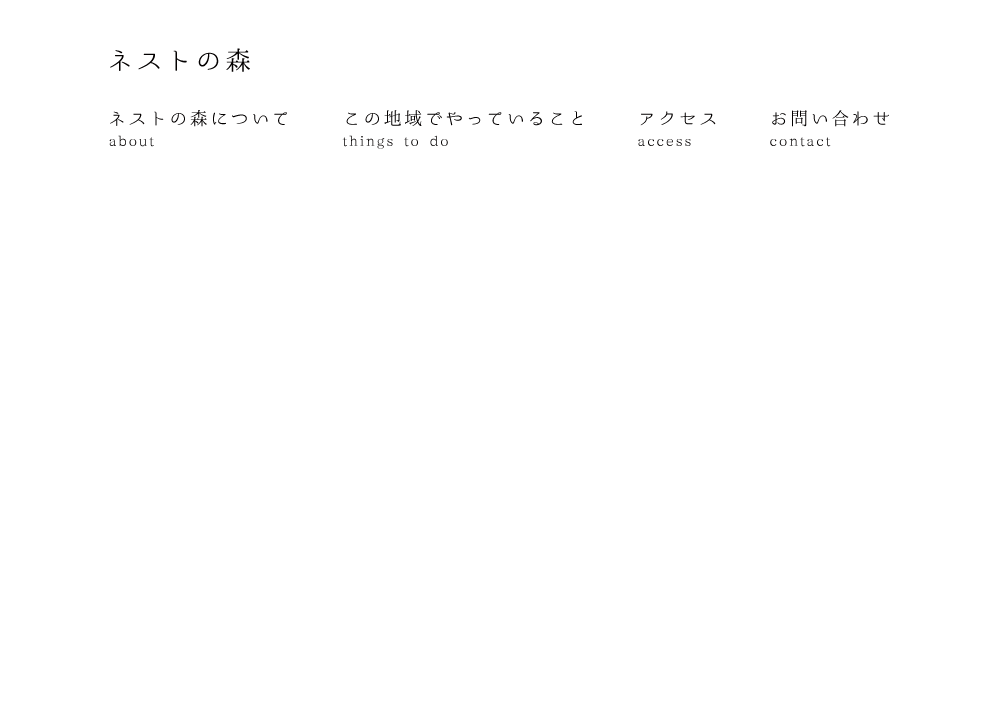
<style>
.page{position:relative;width:1000px;height:717px;background:#ffffff}
.page>*{position:absolute;margin:0}
.t1{font:26px "02UtsukushiMincho";letter-spacing:0.14em;color:#000000}
.t2{font:18px/21px "02UtsukushiMincho";letter-spacing:0.14em;color:#000000}
.t3{font:14px/21px "02UtsukushiMincho";letter-spacing:0.14em;color:#000000}
</style>
<div class="page">
<p class="t1" style="left:110px;top:48px;width:140px;height:24px">ネストの森</p>
<p class="t2" style="left:109px;top:110px;width:178px;height:37px">ネストの森について<br><span class="t3">about</span></p>
<p class="t2" style="left:342px;top:110px;width:240px;height:39px">この地域でやっていること<br><span class="t3">things to do</span></p>
<p class="t3" style="left:638px;top:111px;width:78px;height:35px"><span class="t2">アクセス<br></span>access</p>
<p class="t3" style="left:770px;top:110px;width:119px;height:37px"><span class="t2">お問い合わせ<br></span>contact</p>
</div>
